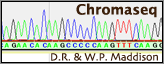
<style>
.page{position:relative;width:164px;height:64px;background:#f0f0f0}
.page>*{position:absolute;margin:0}
.t1{font:14px "LucidaGrande-Bold";color:#3b1f0a}
.t2{font:11px "Skia-Regular";color:#3b1f0a}
</style>
<div class="page">
<p class="t1" style="left:76px;top:3px;width:81px;height:15px">Chromaseq</p>
<p class="t2" style="left:51px;top:52px;width:107px;height:9px">D.R. &amp; W.P. Maddison</p>
</div>
